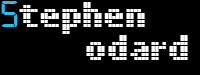
<style>
.page{position:relative;width:200px;height:75px;background:#000000}
.page>*{position:absolute;margin:0}
.t1{font:40px "Digital-7";color:#30bae7}
.t2{font:36px "LLPixel";color:#ffffff}
</style>
<div class="page">
<p class="t1" style="left:1px;top:1px;width:17px;height:26px">S</p>
<p class="t2" style="left:19px;top:2px;width:126px;height:32px">tephen</p>
<p class="t2" style="left:86px;top:35px;width:102px;height:25px">odard</p>
</div>
